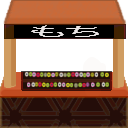
<style>
.page{position:relative;width:128px;height:128px;background:#ffffff}
.page>*{position:absolute;margin:0}
.t1{font:11.9px "KozGoPr6N-Regular";color:#fefafa;scale:3.41 1}
</style>
<div class="page">
<p class="t1" style="left:31px;top:25px;width:67px;height:12px;opacity:0.64">もち</p>
<p class="t1" style="left:32px;top:25px;width:67px;height:12px;opacity:0.64">もち</p>
</div>
